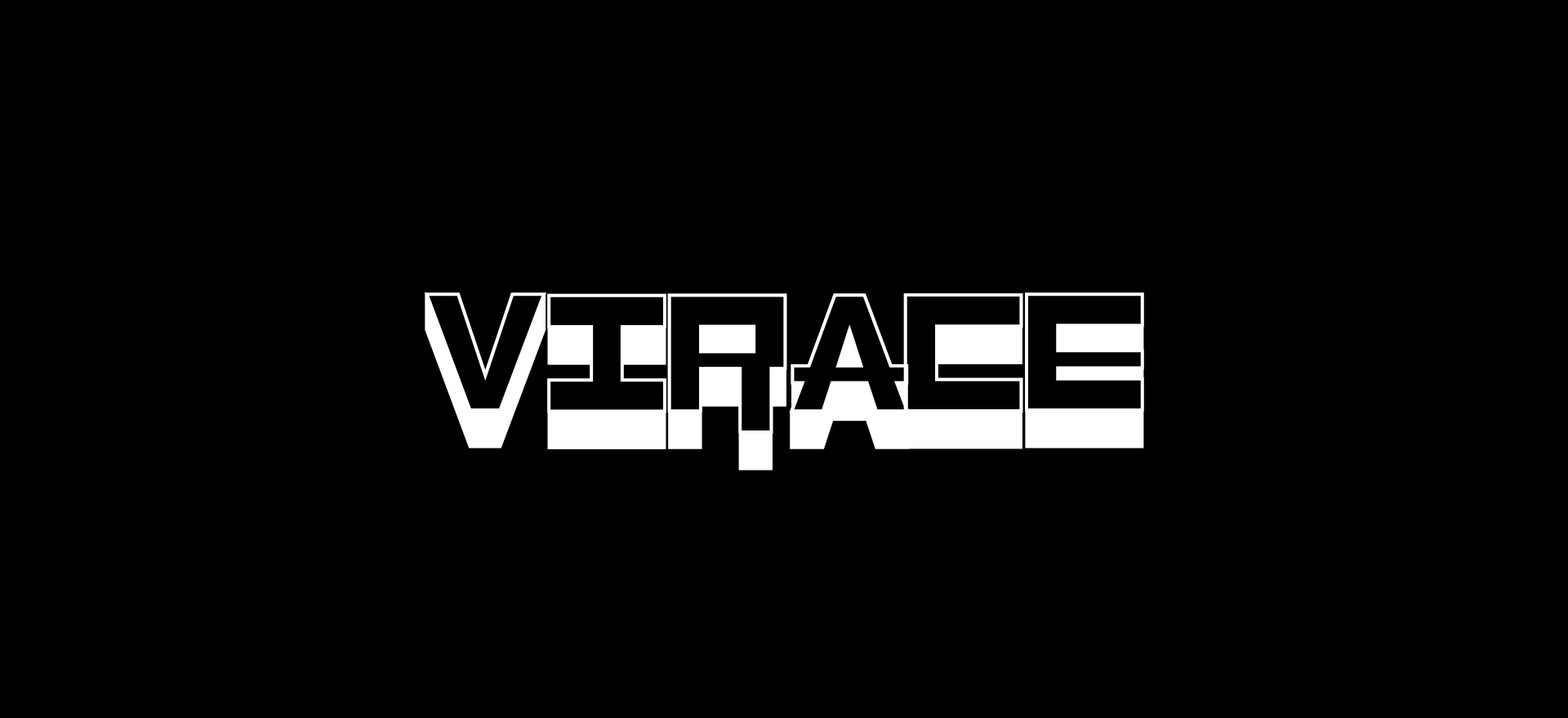
<style>
.page{position:relative;width:1568px;height:718px;background:#000000}
.page>*{position:absolute;margin:0}
.t1{font:122.5px "RaseGPL-Outline";color:#ffffff}
</style>
<div class="page">
<p class="t1" style="left:424px;top:292px;width:720px;height:178px">VIRACE</p>
</div>
